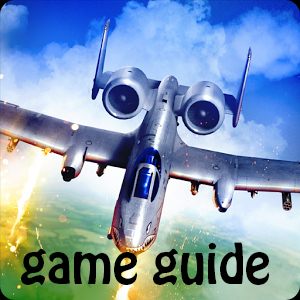
<style>
.page{position:relative;width:300px;height:300px}
.page>*{position:absolute;margin:0}
.t1{font:48px "HoboStd";color:#000000}
</style>
<div class="page">
<p class="t1" style="left:21px;top:242px;width:248px;height:43px">game guide</p>
</div>
